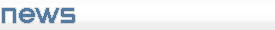
<style>
.page{position:relative;width:275px;height:30px}
.page>*{position:absolute;margin:0}
.t1{font:26px "Zeroes";color:#517ba3}
</style>
<div class="page">
<p class="t1" style="left:2px;top:8px;width:73px;height:15px">news</p>
</div>
